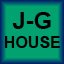
<style>
.page{position:relative;width:64px;height:64px;background:#01a26f}
.page>*{position:absolute;margin:0}
.t1{font:16px "Arial-BoldMT";color:#000000}
.t2{font:24px "Arial-BoldMT";color:#000000}
</style>
<div class="page">
<p class="t1" style="left:4px;top:12px;width:56px;height:36px;text-align:center"><span class="t2">J-G<br></span>HOUSE</p>
</div>
